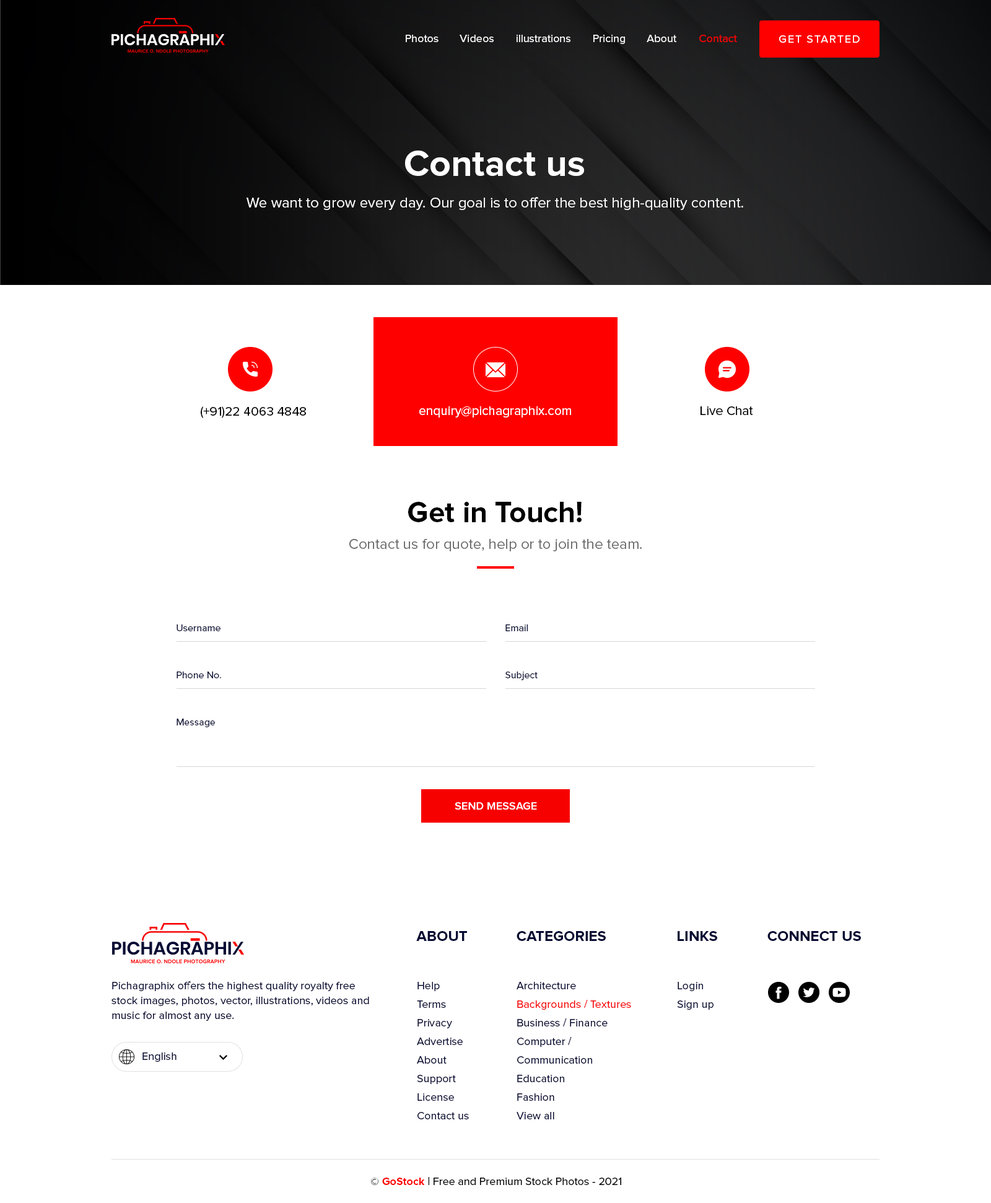
<style>
.page{position:relative;width:991px;height:1203px;background:#ffffff}
.page>*{position:absolute;margin:0}
.t1{font:11.2px "ProximaNova-Regular";color:#ffffff}
.t2{font:11.2px "ProximaNova-Regular";color:#ff0000}
.t3{font:11.2px "ProximaNova-Regular";letter-spacing:0.1em;color:#ffffff}
.t4{font:37.2px "ProximaNova-Bold";color:#ffffff}
.t5{font:14.9px "ProximaNova-Regular";color:#ffffff}
.t6{font:13px "ProximaNova-Regular";color:#000000}
.t7{font:13px "ProximaNova-Regular";color:#ffffff}
.t8{font:29.7px "ProximaNova-Bold";color:#000000}
.t9{font:14.9px "ProximaNova-Regular";color:#666666}
.t10{font:9.9px "ProximaNova-Regular";color:#070b33}
.t11{font:11.2px "ProximaNova-Semibold";color:#ffffff}
.t12{font:14.9px "ProximaNova-Bold";color:#070b33;text-transform:uppercase}
.t13{font:11.2px/14.9px "ProximaNova-Regular";color:#070b33}
.t14{font:11.2px/18.6px "ProximaNova-Regular";color:#070b33}
.t15{font:11.2px/18.6px "ProximaNova-Regular";color:#f70000}
.t16{font:11.2px "ProximaNova-Regular";color:#070b33}
.t17{font:11.2px "ProximaNova-Regular";color:#010101}
.t18{font:11.2px "ProximaNova-Bold";color:#ff0000}
</style>
<div class="page">
<p class="t1" style="left:406px;top:35px;width:33px;height:7px">Photos</p>
<p class="t1" style="left:460px;top:35px;width:34px;height:7px">Videos</p>
<p class="t1" style="left:517px;top:35px;width:54px;height:7px">illustrations</p>
<p class="t1" style="left:593px;top:35px;width:32px;height:9px">Pricing</p>
<p class="t1" style="left:647px;top:35px;width:30px;height:7px">About</p>
<p class="t2" style="left:699px;top:35px;width:38px;height:7px">Contact</p>
<p class="t3" style="left:779px;top:35px;width:81px;height:8px">GET STARTED</p>
<p class="t4" style="left:405px;top:151px;width:179px;height:25px">Contact us</p>
<p class="t5" style="left:247px;top:197px;width:496px;height:13px">We want to grow every day. Our goal is to offer the best high-quality content.</p>
<p class="t6" style="left:201px;top:406px;width:105px;height:12px">(+91)22 4063 4848</p>
<p class="t7" style="left:419px;top:406px;width:152px;height:12px">enquiry@pichagraphix.com</p>
<p class="t6" style="left:701px;top:406px;width:52px;height:9px">Live Chat</p>
<p class="t8" style="left:408px;top:502px;width:174px;height:20px">Get in Touch!</p>
<p class="t9" style="left:349px;top:539px;width:293px;height:12px">Contact us for quote, help or to join the team.</p>
<p class="t10" style="left:177px;top:624px;width:44px;height:7px">Username</p>
<p class="t10" style="left:506px;top:624px;width:22px;height:7px">Email</p>
<p class="t10" style="left:177px;top:672px;width:44px;height:6px">Phone No.</p>
<p class="t10" style="left:506px;top:672px;width:32px;height:8px">Subject</p>
<p class="t10" style="left:177px;top:719px;width:38px;height:8px">Message</p>
<p class="t11" style="left:455px;top:802px;width:82px;height:8px">SEND MESSAGE</p>
<p class="t12" style="left:416px;top:931px;width:51px;height:10px">About</p>
<p class="t12" style="left:517px;top:931px;width:89px;height:10px">Categories</p>
<p class="t12" style="left:678px;top:931px;width:39px;height:10px">Links</p>
<p class="t12" style="left:768px;top:931px;width:93px;height:10px">connect us</p>
<p class="t13" style="left:112px;top:981px;width:257px;height:40px">Pichagraphix offers the highest quality royalty free stock images, photos, vector, illustrations, videos and music for almost any use.</p>
<p class="t14" style="left:417px;top:982px;width:52px;height:137px">Help<br>Terms<br>Privacy<br>Advertise<br>About<br>Support<br>License<br>Contact us</p>
<p class="t14" style="left:517px;top:982px;width:114px;height:137px">Architecture<br><span class="t15">Backgrounds / Textures<br></span>Business / Finance<br>Computer / Communication<br>Education<br>Fashion<br>View all</p>
<p class="t14" style="left:677px;top:982px;width:37px;height:28px">Login<br>Sign up</p>
<p class="t16" style="left:142px;top:1053px;width:35px;height:9px">English</p>
<p class="t17" style="left:371px;top:1177px;width:250px;height:8px">© <span class="t18">GoStock</span> | Free and Premium Stock Photos - 2021</p>
</div>
